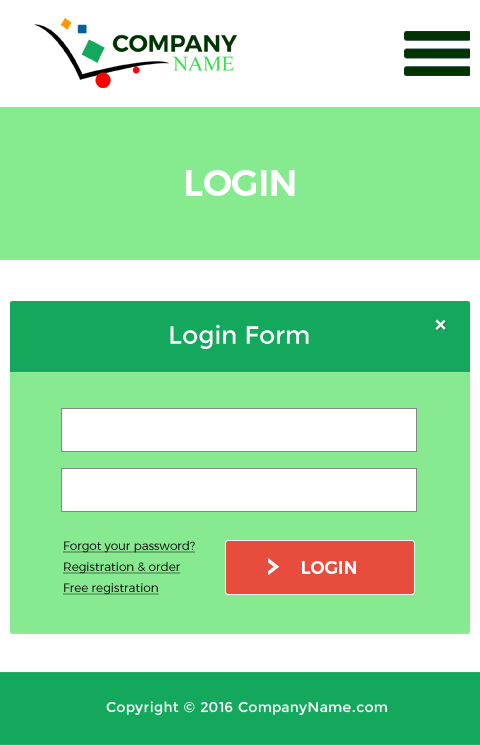
<style>
.page{position:relative;width:480px;height:745px;background:#ffffff}
.page>*{position:absolute;margin:0}
.t1{font:36px "Montserrat-SemiBold";color:#ffffff;text-transform:uppercase}
.t2{font:24.9px "Montserrat-Regular";color:#ffffff}
.t3{font:24px "HelveticaNeue-Bold";color:#ffffff}
.t4{font:12px "Montserrat-Light";color:#000000;text-decoration:underline}
.t5{font:18px "Montserrat-SemiBold";color:#ffffff;text-transform:uppercase}
.t6{font:14px "Montserrat-Regular";letter-spacing:0.025em;color:#ffffff}
</style>
<div class="page">
<p class="t1" style="left:186px;top:170px;width:109px;height:26px">Login</p>
<p class="t2" style="left:170px;top:324px;width:139px;height:25px">Login Form</p>
<p class="t3" style="left:435px;top:319px;width:11px;height:11px;rotate:45deg">+</p>
<p class="t4" style="left:63px;top:541px;width:132px;height:12px">Forgot your password?</p>
<p class="t4" style="left:63px;top:562px;width:118px;height:12px">Registration &amp; order</p>
<p class="t5" style="left:302px;top:561px;width:54px;height:13px">LOGIN</p>
<p class="t4" style="left:63px;top:583px;width:96px;height:12px">Free registration</p>
<p class="t6" style="left:106px;top:701px;width:282px;height:15px">Copyright © 2016 CompanyName.com</p>
</div>
